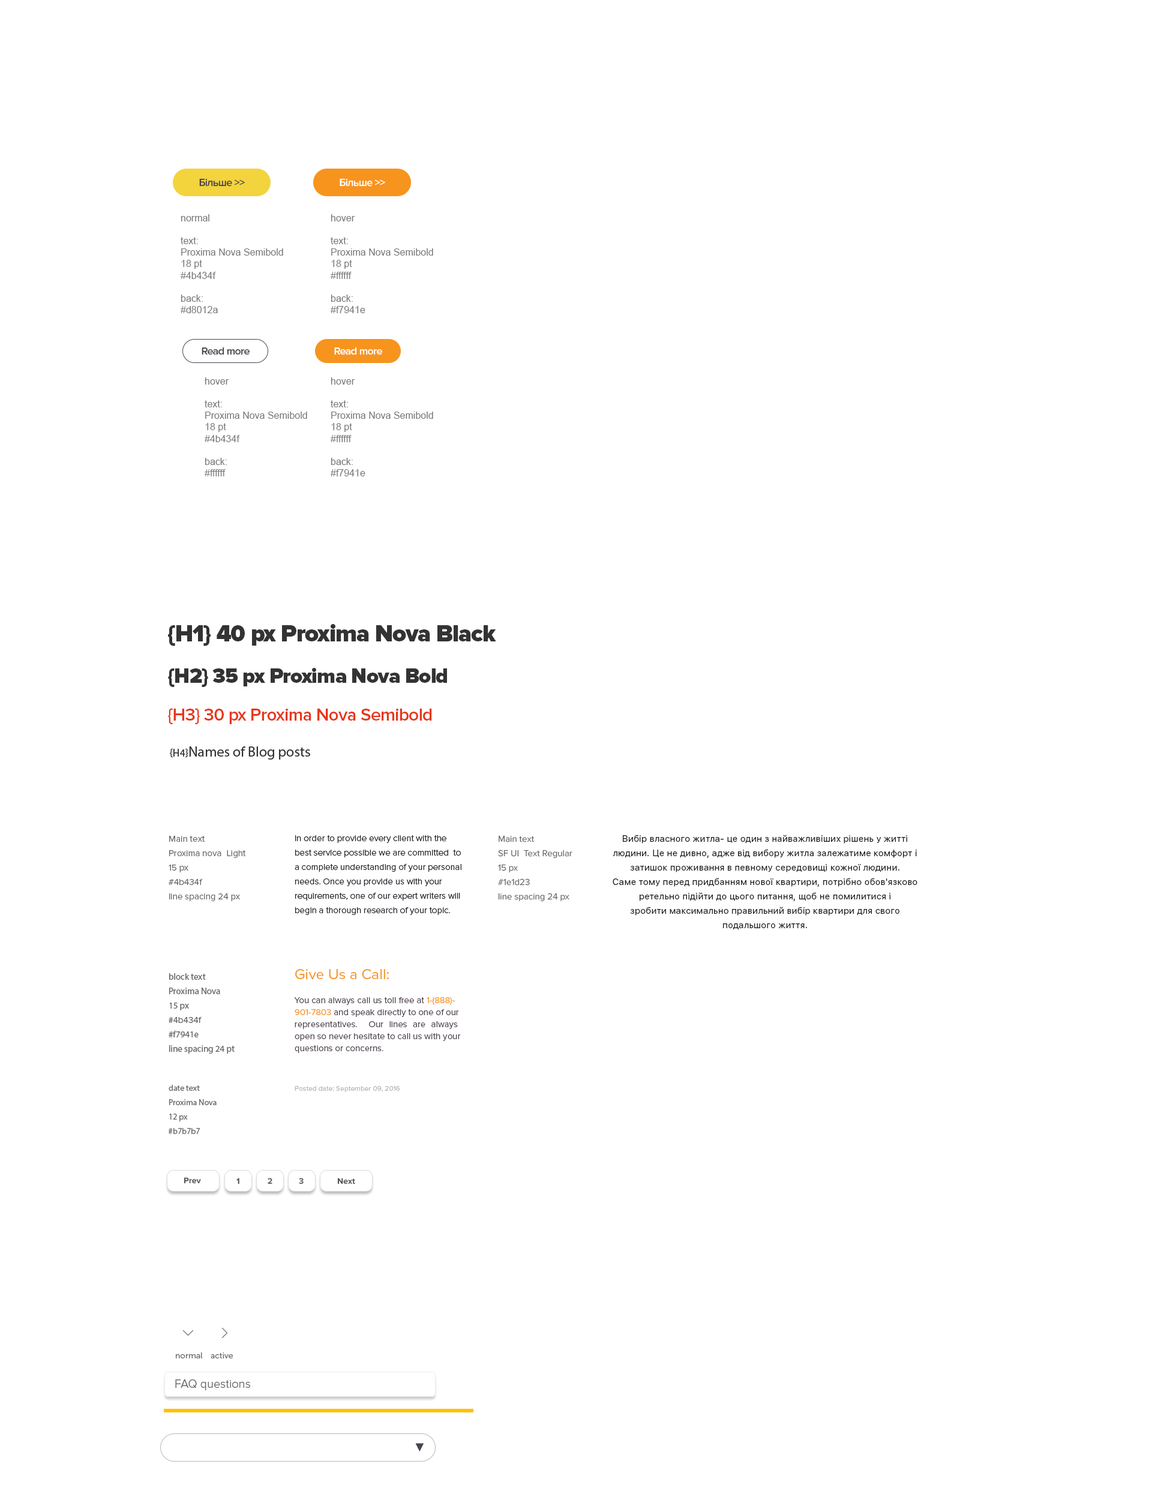
<style>
.page{position:relative;width:1152px;height:1500px;background:#ffffff}
.page>*{position:absolute;margin:0}
.t1{font:10.8px "ProximaNova-Semibold";letter-spacing:-0.04em;color:#4b434f}
.t2{font:10.8px "ProximaNova-Semibold";letter-spacing:-0.04em;color:#ffffff}
.t3{font:9.6px "ArialMT";color:#767676}
.t4{font:24px "ProximaNova-Black";letter-spacing:-0.025em;color:#333333}
.t5{font:21px "ProximaNova-Black";letter-spacing:-0.025em;color:#333333}
.t6{font:18px "ProximaNova-Semibold";letter-spacing:-0.025em;color:#e73618}
.t7{font:14.4px "MyriadPro-Regular";color:#333333}
.t8{font:10.8px "MyriadPro-Regular";color:#333333;text-transform:uppercase}
.t9{font:9px/14.4px "ProximaNova-Regular";color:#666666}
.t10{font:9px/14.4px "ProximaNova-Light";color:#1e1d23}
.t11{font:9px/14.4px "SFUIText-Regular";color:#1e1d23}
.t12{font:9px/14.4px "MyriadPro-Regular";color:#666666}
.t13{font:9px/12px "ProximaNova-Regular";color:#4d414e}
.t14{font:15px/12px "ProximaNova-Regular";color:#f7941e}
.t15{font:9px/12px "ProximaNova-Regular";color:#f7941e}
.t16{font:8.4px/14.4px "MyriadPro-Regular";color:#666666}
.t17{font:7.2px "ProximaNova-Regular";color:#b7b7b7}
.t18{font:8.4px "ProximaNova-Bold";color:#535353}
.t19{font:8.4px "ProximaNova-Bold";color:#4e4751}
.t20{font:8.4px "ProximaNova-Bold";color:#626262}
.t21{font:8.4px "MuseoSans-300";color:#666666}
.t22{font:12px "ProximaNova-Light";color:#646464}
.t23{font:12px "ProximaNova-Light";color:#646464;text-transform:uppercase}
.t24{font:11.8px "ArialMT";color:#4b434f}
</style>
<div class="page">
<p class="t1" style="left:199px;top:178px;width:46px;height:9px">Більше &gt;&gt;</p>
<p class="t2" style="left:340px;top:178px;width:45px;height:9px">Більше &gt;&gt;</p>
<p class="t3" style="left:181px;top:214px;width:102px;height:99px">normal<br><br>text:<br>Proxima Nova Semibold<br>18 pt<br>#4b434f<br><br>back:<br>#d8012a</p>
<p class="t3" style="left:331px;top:214px;width:102px;height:99px">hover<br><br>text:<br>Proxima Nova Semibold<br>18 pt<br>#ffffff<br><br>back:<br>#f7941e</p>
<p class="t1" style="left:202px;top:347px;width:48px;height:8px">Read more</p>
<p class="t2" style="left:334px;top:347px;width:49px;height:8px">Read more</p>
<p class="t3" style="left:205px;top:377px;width:102px;height:99px">hover<br><br>text:<br>Proxima Nova Semibold<br>18 pt<br>#4b434f<br><br>back:<br>#ffffff</p>
<p class="t3" style="left:331px;top:377px;width:102px;height:99px">hover<br><br>text:<br>Proxima Nova Semibold<br>18 pt<br>#ffffff<br><br>back:<br>#f7941e</p>
<p class="t4" style="left:168px;top:624px;width:328px;height:22px">{H1} 40 px Proxima Nova Black</p>
<p class="t5" style="left:168px;top:668px;width:279px;height:19px">{H2} 35 px Proxima Nova Bold</p>
<p class="t6" style="left:168px;top:708px;width:264px;height:16px">{H3} 30 px Proxima Nova Semibold</p>
<p class="t7" style="left:170px;top:746px;width:140px;height:14px"><span class="t8">{h4}</span>Names of Blog posts</p>
<p class="t9" style="left:169px;top:836px;width:77px;height:65px;text-align:justify">Main text<br>Proxima nova  Light<br>15 px<br>#4b434f<br>line spacing 24 px</p>
<p class="t10" style="left:295px;top:835px;width:166px;height:80px">In order to provide every client with the best service possible we are committed  to a complete understanding of your personal needs. Once you provide us with your <br>requirements, one of our expert writers will begin a thorough research of your topic.</p>
<p class="t9" style="left:498px;top:835px;width:74px;height:67px;text-align:justify">Main text<br>SF UI  Text Regular<br>15 px<br>#1e1d23<br>line spacing 24 px</p>
<p class="t11" style="left:613px;top:835px;width:304px;height:95px;text-align:center">Вибір власного житла- це один з найважливіших рішень у житті людини. Це не дивно, адже від вибору житла залежатиме комфорт і затишок проживання в певному середовищі кожної людини. <br>Саме тому перед придбанням нової квартири, потрібно обов'язково ретельно підійти до цього питання, щоб не помилитися і <br>зробити максимально правильний вибір квартири для свого подальшого життя.</p>
<p class="t12" style="left:169px;top:973px;width:66px;height:81px;text-align:justify">block text<br>Proxima Nova<br>15 px<br>#<span class="t9">4b434f<br></span>#f7941e<br>line spacing 24 pt</p>
<p class="t13" style="left:294px;top:969px;width:167px;height:84px;text-align:justify"><span class="t14">Give Us a Call:<br></span><br>You can always call us toll free at <span class="t15">1-(888)-901-7803</span> and speak directly to one of our <br>representatives.  Our lines are always open so never hesitate to call us with your<br>questions or concerns.</p>
<p class="t16" style="left:169px;top:1085px;width:48px;height:49px;text-align:justify">date text<br>Proxima Nova<br>12 px<br>#b7b7b7</p>
<p class="t17" style="left:295px;top:1086px;width:105px;height:6px">Posted date: September 09, 2016</p>
<p class="t18" style="left:184px;top:1177px;width:17px;height:7px">Prev</p>
<p class="t19" style="left:236px;top:1178px;width:3px;height:6px">1</p>
<p class="t20" style="left:268px;top:1178px;width:4px;height:6px">2</p>
<p class="t20" style="left:299px;top:1178px;width:5px;height:6px">3</p>
<p class="t18" style="left:337px;top:1178px;width:18px;height:6px">Next</p>
<p class="t21" style="left:176px;top:1352px;width:27px;height:6px">normal</p>
<p class="t21" style="left:211px;top:1352px;width:22px;height:6px">active</p>
<p class="t22" style="left:175px;top:1379px;width:75px;height:11px"><span class="t23">FAQ </span>questions</p>
<p class="t24" style="left:415px;top:1443px;width:9px;height:8px">▼</p>
</div>
